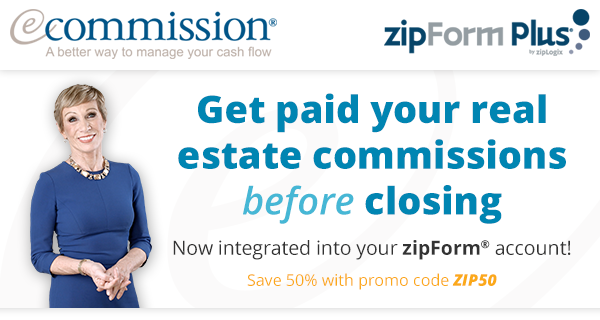
<style>
.page{position:relative;width:600px;height:320px;background:#ffffff}
.page>*{position:absolute;margin:0}
.t1{font:38.1px "OpenSans-Extrabold";color:#0085b2}
.t2{font:38.1px "OpenSans-SemiboldItalic";color:#46b7d5}
.t3{font:19.4px "OpenSans";color:#333333}
.t4{font:19.4px "OpenSans-Bold";color:#333333}
.t5{font:16px "OpenSans";color:#fba919}
.t6{font:16px "OpenSans-ExtraboldItalic";color:#fba919}
</style>
<div class="page">
<p class="t1" style="left:178px;top:93px;width:388px;height:131px;text-align:center">Get paid your real<br>estate commissions<br><span class="t2">before</span> closing</p>
<p class="t3" style="left:173px;top:240px;width:398px;height:20px">Now integrated into your <span class="t4">zipForm®</span> account!</p>
<p class="t5" style="left:247px;top:273px;width:250px;height:17px">Save 50% with promo code <span class="t6">ZIP50</span></p>
</div>
